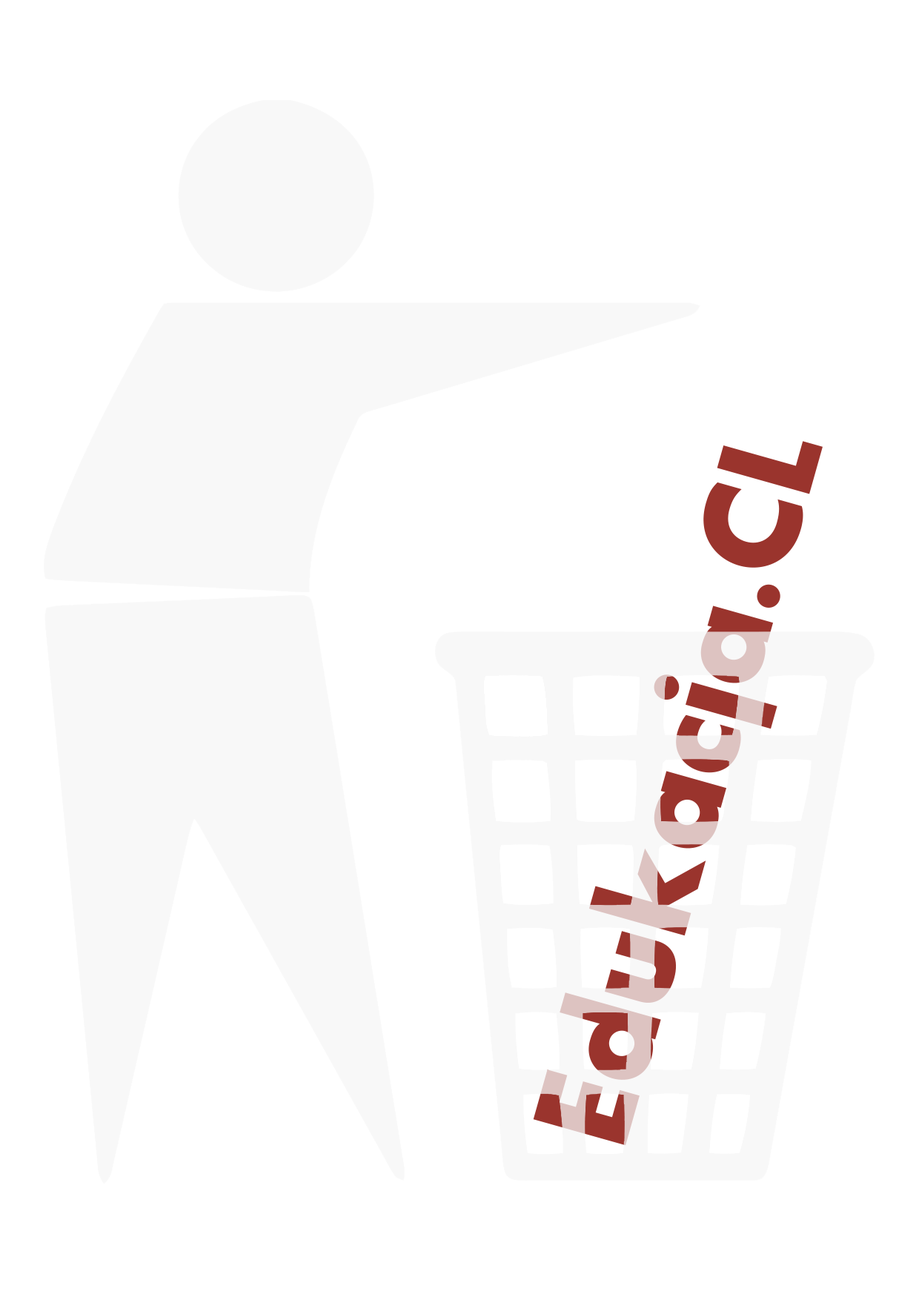
<style>
.page{position:relative;width:919px;height:1297px;background:#ffffff}
.page>*{position:absolute;margin:0}
.t1{font:134.1px "SansSerifBldFLF"}
</style>
<div class="page">
<p class="t1" style="left:533px;top:441px;width:290px;height:705px;rotate:-74deg">Edukacja.CL</p>
</div>
